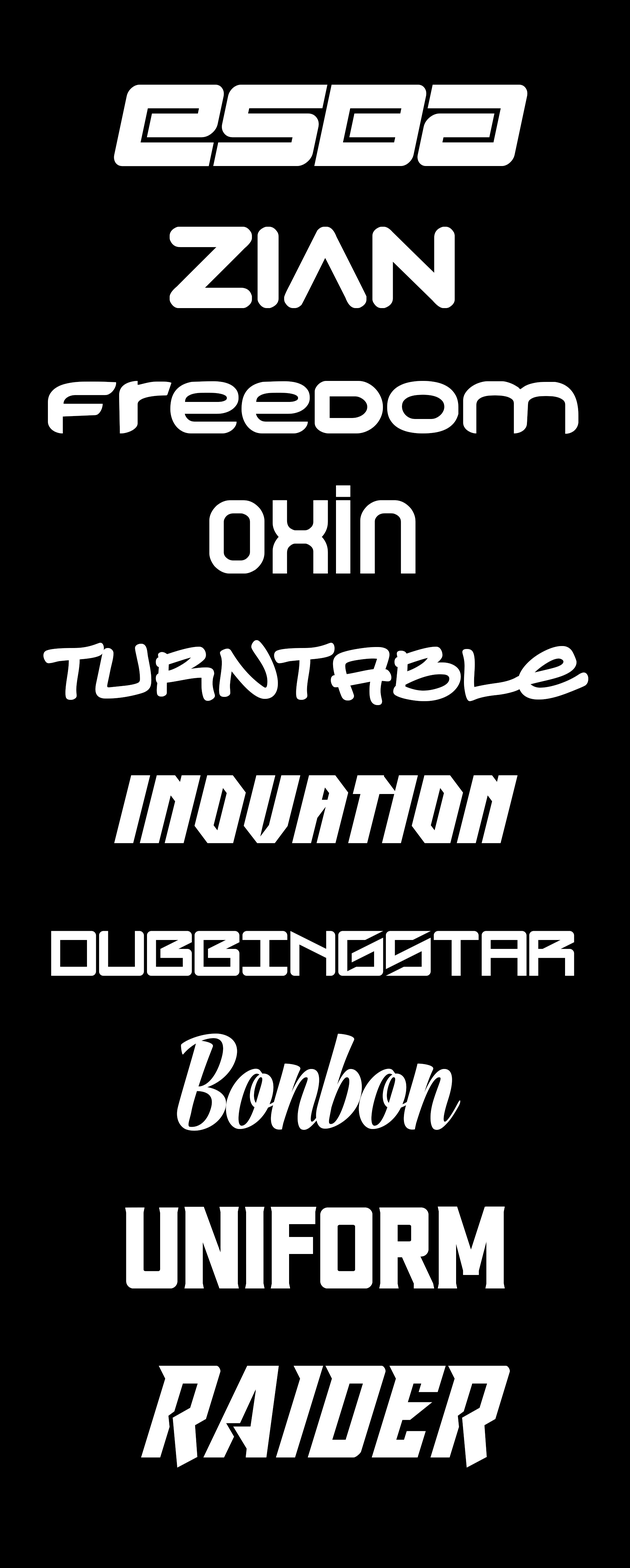
<style>
.page{position:relative;width:630px;height:1568px;background:#000000}
.page>*{position:absolute;margin:0}
.t1{font:116.2px "Esba-Italic";letter-spacing:-0.14em;color:#ffffff}
.t2{font:116.2px "Zian";letter-spacing:-0.14em;color:#ffffff}
.t3{font:104.8px "FREEDOM";letter-spacing:-0.14em;color:#ffffff}
.t4{font:104.8px "Oxin";letter-spacing:-0.14em;color:#ffffff}
.t5{font:70.3px "TurntablzBBBold";letter-spacing:-0.14em;color:#ffffff}
.t6{font:99.8px "INOVATION-Bold";letter-spacing:-0.14em;color:#ffffff}
.t7{font:71.6px "DubbingStar";letter-spacing:-0.14em;color:#ffffff}
.t8{font:116.2px "BonbonRegular";letter-spacing:-0.02em;color:#ffffff}
.t9{font:116.2px "UniformBoldBold";letter-spacing:-0.02em;color:#ffffff}
.t10{font:104px "RaiderCrusader";color:#ffffff}
</style>
<div class="page">
<p class="t1" style="left:114px;top:85px;width:414px;height:81px">e s b a</p>
<p class="t2" style="left:170px;top:227px;width:285px;height:81px">zian</p>
<p class="t3" style="left:48px;top:381px;width:530px;height:53px">freedom</p>
<p class="t4" style="left:209px;top:485px;width:207px;height:89px">o x i n</p>
<p class="t5" style="left:43px;top:640px;width:545px;height:65px">turntable</p>
<p class="t6" style="left:114px;top:775px;width:404px;height:68px">I N O V A T I O N</p>
<p class="t7" style="left:51px;top:931px;width:523px;height:45px">DUBBINGSTAR</p>
<p class="t8" style="left:177px;top:1034px;width:283px;height:97px">Bonbon</p>
<p class="t9" style="left:125px;top:1206px;width:380px;height:82px">Uniform</p>
<p class="t9" style="left:125px;top:1206px;width:380px;height:82px">Uniform</p>
<p class="t10" style="left:141px;top:1366px;width:369px;height:102px">RAIDER</p>
</div>
